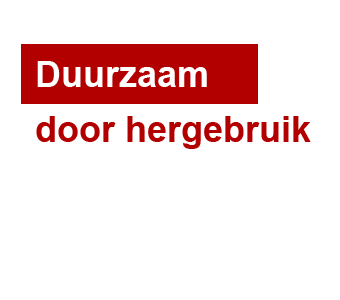
<style>
.page{position:relative;width:340px;height:300px;background:#ffffff}
.page>*{position:absolute;margin:0}
.t1{font:36px "Arial-BoldMT";color:#ffffff}
.t2{font:36px "Arial-BoldMT";color:#b20000}
</style>
<div class="page">
<p class="t1" style="left:37px;top:61px;width:170px;height:26px">Duurzaam</p>
<p class="t2" style="left:36px;top:116px;width:275px;height:33px">door hergebruik</p>
</div>
